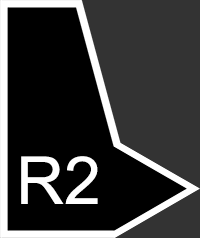
<style>
.page{position:relative;width:200px;height:238px;background:#000000}
.page>*{position:absolute;margin:0}
.t1{font:66.1px "ArialMT";color:#ffffff}
</style>
<div class="page">
<p class="t1" style="left:21px;top:156px;width:77px;height:48px">R2</p>
</div>
